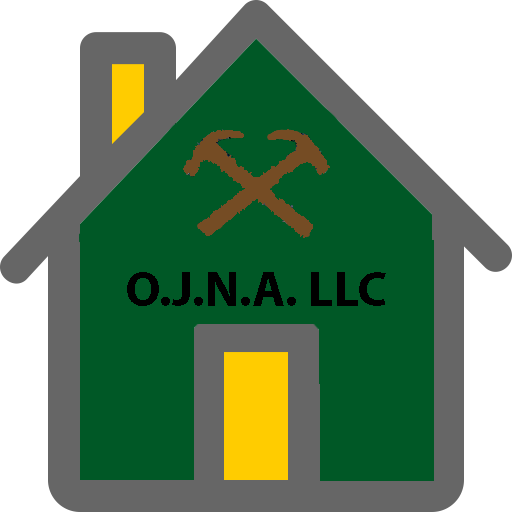
<style>
.page{position:relative;width:512px;height:512px;background:#005826}
.page>*{position:absolute;margin:0}
.t1{font:50px "MyriadPro-Bold";color:#000000}
</style>
<div class="page">
<p class="t1" style="left:127px;top:272px;width:259px;height:34px">O.J.N.A. LLC</p>
</div>
